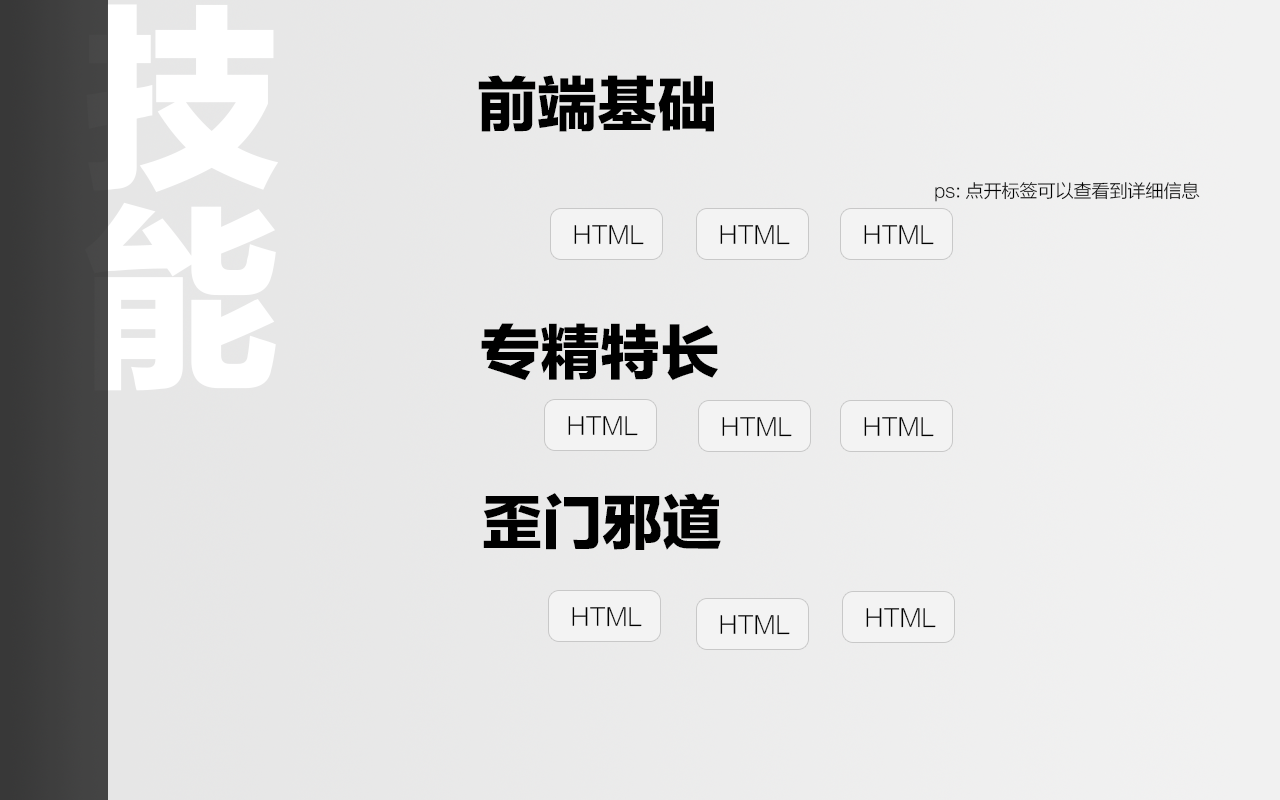
<style>
.page{position:relative;width:1280px;height:800px}
.page>*{position:absolute;margin:0}
.t1{font:60px "FZLTTHK--GBK1-0";color:#000000}
.t2{font:18px "FZLTXHK--GBK1-0";color:#000000}
.t3{font:24px "FZLTXHK--GBK1-0";color:#000000}
</style>
<div class="page">
<p class="t1" style="left:478px;top:75px;width:236px;height:57px">前端基础</p>
<p class="t2" style="left:935px;top:182px;width:265px;height:20px">ps: 点开标签可以查看到详细信息</p>
<p class="t3" style="left:574px;top:225px;width:70px;height:20px">HTML</p>
<p class="t3" style="left:720px;top:225px;width:70px;height:20px">HTML</p>
<p class="t3" style="left:864px;top:225px;width:70px;height:20px">HTML</p>
<p class="t1" style="left:481px;top:323px;width:237px;height:58px">专精特长</p>
<p class="t3" style="left:568px;top:416px;width:70px;height:20px">HTML</p>
<p class="t3" style="left:722px;top:417px;width:70px;height:20px">HTML</p>
<p class="t3" style="left:864px;top:417px;width:70px;height:20px">HTML</p>
<p class="t1" style="left:483px;top:493px;width:238px;height:57px">歪门邪道</p>
<p class="t3" style="left:572px;top:607px;width:70px;height:20px">HTML</p>
<p class="t3" style="left:720px;top:615px;width:70px;height:20px">HTML</p>
<p class="t3" style="left:866px;top:608px;width:70px;height:20px">HTML</p>
</div>
